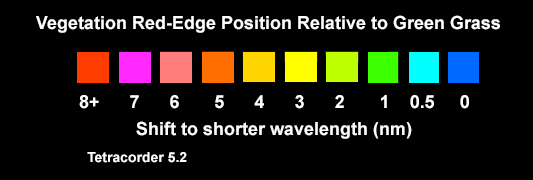
<style>
.page{position:relative;width:533px;height:180px;background:#000000}
.page>*{position:absolute;margin:0}
.t1{font:18px "Arial-BoldMT";color:#fffefe}
.t2{font:14px "Arial-BoldMT";color:#fffefe}
</style>
<div class="page">
<p class="t1" style="left:36px;top:15px;width:464px;height:18px">Vegetation Red-Edge Position Relative to Green Grass</p>
<p class="t1" style="left:79px;top:95px;width:390px;height:14px">8+      7      6       5      4      3      2       1    0.5     0</p>
<p class="t1" style="left:136px;top:121px;width:276px;height:18px">Shift to shorter wavelength (nm)</p>
<p class="t2" style="left:87px;top:152px;width:100px;height:11px">Tetracorder 5.2</p>
</div>
